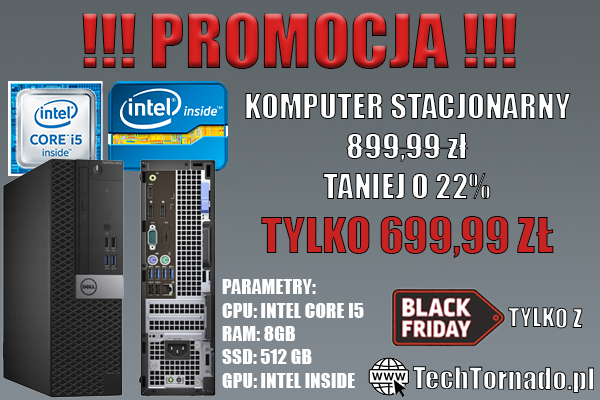
<style>
.page{position:relative;width:600px;height:400px}
.page>*{position:absolute;margin:0}
.t1{font:70.4px "Impact"}
.t2{font:33px "Impact";color:#ffffff}
.t3{font:45.5px "Impact";color:#c82323;text-transform:uppercase}
.t4{font:19.5px "Impact";color:#fefefe}
</style>
<div class="page">
<p class="t1" style="left:82px;top:12px;width:435px;height:57px">!!! PROMOCJA !!!</p>
<p class="t2" style="left:245px;top:93px;width:326px;height:165px;text-align:center">KOMPUTER STACJONARNY<br>899,99 zł<br>TANIEJ O 22%<br><span class="t3">TYLKO 699,99 zł</span></p>
<p class="t4" style="left:222px;top:279px;width:142px;height:109px">PARAMETRY:<br>CPU: INTEL CORE I5<br>RAM: 8GB<br>SSD: 512 GB<br>GPU: INTEL INSIDE</p>
</div>
